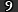
<style>
.page{position:relative;width:18px;height:12px;background:#333333}
.page>*{position:absolute;margin:0}
.t1{font:17px "Perpetua-Bold";color:#ffffff}
</style>
<div class="page">
<p class="t1" style="left:5px;top:1px;width:8px;height:10px">9</p>
</div>
